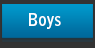
<style>
.page{position:relative;width:95px;height:48px;background:#333333}
.page>*{position:absolute;margin:0}
.t1{font:17px "BellGothicStd-Bold";color:#ffffff}
</style>
<div class="page">
<p class="t1" style="left:29px;top:13px;width:32px;height:16px">Boys</p>
</div>
